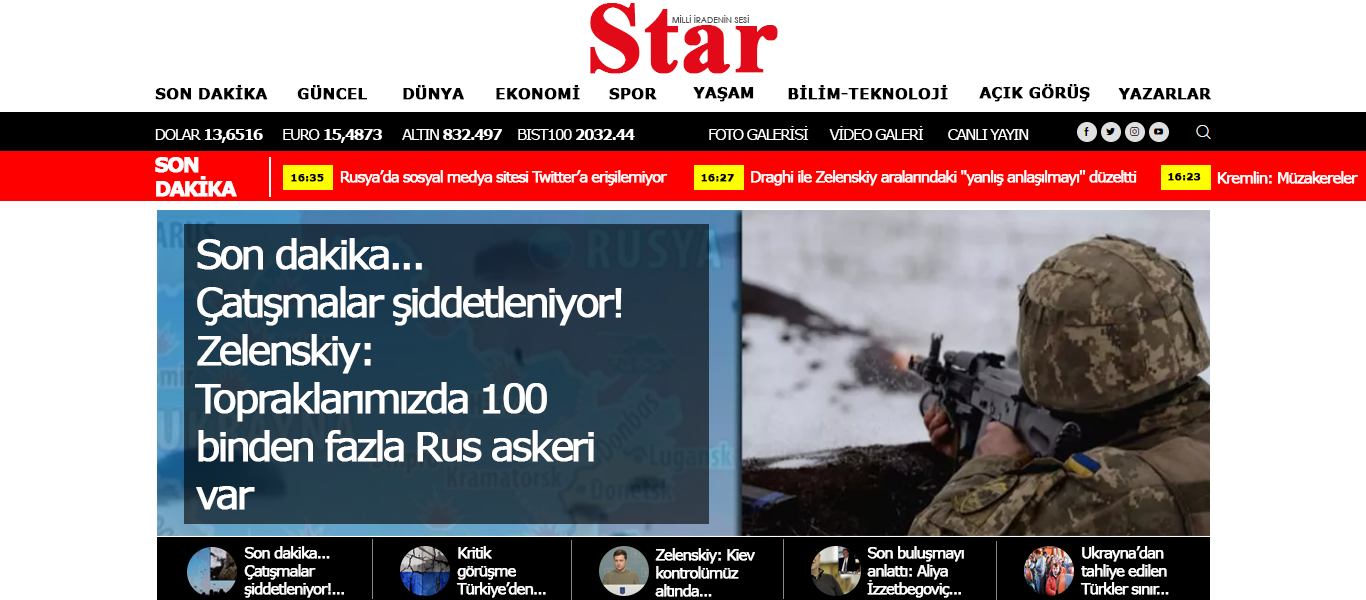
<style>
.page{position:relative;width:1366px;height:600px;background:#ffffff}
.page>*{position:absolute;margin:0}
.t1{font:100px "TimesNewRomanPS-BoldMT";color:#e20a19;font-weight:bold}
.t2{font:8px "CenturyGothic";color:#545454;font-weight:bold}
.t3{font:15px "Verdana-Bold";color:#000000;font-weight:bold}
.t4{font:15px "Verdana";letter-spacing:-0.1em;color:#ffffff}
.t5{font:15px "Verdana-Bold";letter-spacing:-0.1em;color:#ffffff}
.t6{font:20px "Verdana-Bold";letter-spacing:-0.1em;color:#ffffff;text-transform:uppercase;font-weight:bold}
.t7{font:10px "Verdana-Bold";color:#000000;font-weight:bold}
.t8{font:15px "Verdana";letter-spacing:-0.1em;color:#ffffff;font-weight:bold}
.t9{font:40px "Verdana";letter-spacing:-0.1em;color:#ffffff;font-weight:bold}
</style>
<div class="page">
<p class="t1" style="left:590px;top:3px;width:188px;height:71px">Star</p>
<p class="t2" style="left:672px;top:15px;width:77px;height:8px">MİLLİ İRADENİN SESİ</p>
<p class="t3" style="left:155px;top:85px;width:113px;height:15px">SON DAKİKA</p>
<p class="t3" style="left:297px;top:85px;width:70px;height:15px">GÜNCEL</p>
<p class="t3" style="left:403px;top:85px;width:61px;height:15px">DÜNYA</p>
<p class="t3" style="left:496px;top:85px;width:84px;height:15px">EKONOMİ</p>
<p class="t3" style="left:609px;top:88px;width:48px;height:12px">SPOR</p>
<p class="t3" style="left:693px;top:87px;width:61px;height:15px">YAŞAM</p>
<p class="t3" style="left:788px;top:85px;width:160px;height:15px">BİLİM-TEKNOLOJİ</p>
<p class="t3" style="left:979px;top:84px;width:111px;height:18px">AÇIK GÖRÜŞ</p>
<p class="t3" style="left:1118px;top:88px;width:93px;height:12px">YAZARLAR</p>
<p class="t4" style="left:709px;top:126px;width:100px;height:14px">FOTO GALERİSİ</p>
<p class="t4" style="left:829px;top:126px;width:95px;height:14px">VİDEO GALERİ</p>
<p class="t5" style="left:155px;top:129px;width:108px;height:14px"><span class="t4">DOLAR </span>13,6516</p>
<p class="t5" style="left:283px;top:129px;width:99px;height:14px"><span class="t4">EURO </span>15,4873</p>
<p class="t5" style="left:402px;top:129px;width:100px;height:11px"><span class="t4">ALTIN </span>832.497</p>
<p class="t4" style="left:518px;top:129px;width:117px;height:11px">BIST100 <span class="t5">2032.44</span></p>
<p class="t4" style="left:948px;top:129px;width:81px;height:11px">CANLI YAYIN</p>
<p class="t6" style="left:155px;top:157px;width:82px;height:40px">SON<br>DAKİKA</p>
<p class="t7" style="left:291px;top:174px;width:33px;height:8px">16:35</p>
<p class="t8" style="left:340px;top:170px;width:328px;height:16px">Rusya’da sosyal medya sitesi Twitter’a erişilemiyor</p>
<p class="t7" style="left:701px;top:174px;width:33px;height:8px">16:27</p>
<p class="t8" style="left:751px;top:170px;width:386px;height:16px">Draghi ile Zelenskiy aralarındaki ''yanlış anlaşılmayı'' düzeltti</p>
<p class="t7" style="left:1168px;top:173px;width:33px;height:8px">16:23</p>
<p class="t8" style="left:1217px;top:171px;width:141px;height:13px">Kremlin: Müzakereler</p>
<p class="t9" style="left:195px;top:238px;width:427px;height:272px">Son dakika... <br>Çatışmalar şiddetleniyor!<br>Zelenskiy: <br>Topraklarımızda 100 <br>binden fazla Rus askeri<br>var</p>
<p class="t8" style="left:244px;top:546px;width:100px;height:52px">Son dakika...<br>Çatışmalar<br>şiddetleniyor!...</p>
<p class="t8" style="left:456px;top:546px;width:90px;height:52px">Kritik<br>görüşme<br>Türkiye’den...</p>
<p class="t8" style="left:655px;top:548px;width:100px;height:49px">Zelenskiy: Kiev<br>kontrolümüz<br>altında...</p>
<p class="t8" style="left:867px;top:546px;width:97px;height:52px">Son buluşmayı<br>anlattı: Aliya<br>İzzetbegoviç...</p>
<p class="t8" style="left:1080px;top:546px;width:89px;height:49px">Ukrayna’dan<br>tahliye edilen<br>Türkler sınır...</p>
</div>
